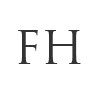
<style>
.page{position:relative;width:100px;height:100px;background:#ffffff}
.page>*{position:absolute;margin:0}
.t1{font:45px "TrajanPro-Regular";color:#333333}
</style>
<div class="page">
<p class="t1" style="left:18px;top:30px;width:63px;height:34px">FH</p>
</div>
